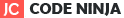
<style>
.page{position:relative;width:124px;height:18px;background:#ffffff}
.page>*{position:absolute;margin:0}
.t1{font:18px "BerlinSansFB-Reg";color:#ffffff}
.t2{font:16px "BerlinSansFBDemi-Bold";color:#25292b}
</style>
<div class="page">
<p class="t1" style="left:3px;top:3px;width:16px;height:13px">JC</p>
<p class="t2" style="left:29px;top:3px;width:92px;height:13px">CODE NINJA</p>
</div>
